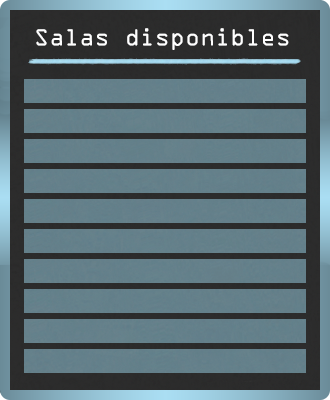
<style>
.page{position:relative;width:330px;height:400px}
.page>*{position:absolute;margin:0}
.t1{font:25px "OCRAExtended";color:#ffffff}
</style>
<div class="page">
<p class="t1" style="left:36px;top:28px;width:253px;height:22px">Salas disponibles</p>
</div>
